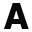
<style>
.page{position:relative;width:32px;height:32px;background:#ffffff}
.page>*{position:absolute;margin:0}
.t1{font:36px "Tahoma-Bold";color:#070707;text-transform:uppercase}
</style>
<div class="page">
<p class="t1" style="left:4px;top:3px;width:25px;height:26px">A</p>
</div>
